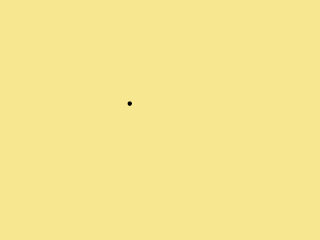
<style>
.page{position:relative;width:320px;height:240px;background:#f7e790}
.page>*{position:absolute;margin:0}
.t1{font:30px "SourceHanSans-Medium";letter-spacing:0.1em;color:#000000}
</style>
<div class="page">
<p class="t1" style="left:127px;top:101px;width:5px;height:5px">.</p>
</div>
